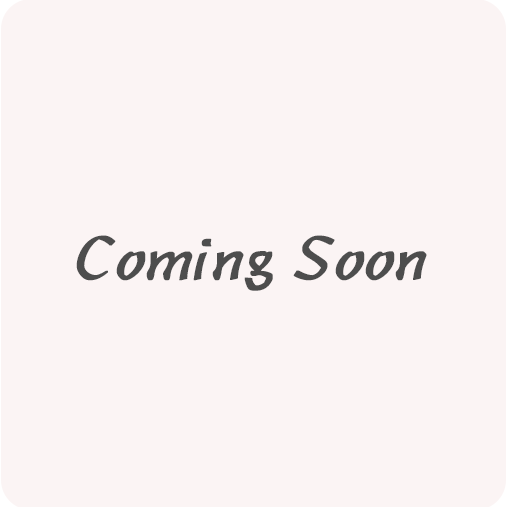
<style>
.page{position:relative;width:507px;height:507px;background:#fbf4f4}
.page>*{position:absolute;margin:0}
.t1{font:72px "STLibianSC-Regular";color:#4d4d4d;font-weight:bold}
</style>
<div class="page">
<p class="t1" style="left:76px;top:235px;width:351px;height:56px">Coming Soon</p>
</div>
